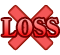
<style>
.page{position:relative;width:60px;height:55px;background:#ffffff}
.page>*{position:absolute;margin:0}
.t1{font:22px "RyuminPro-Ultra"}
</style>
<div class="page">
<p class="t1" style="left:2px;top:18px;width:57px;height:18px">LOSS</p>
</div>
